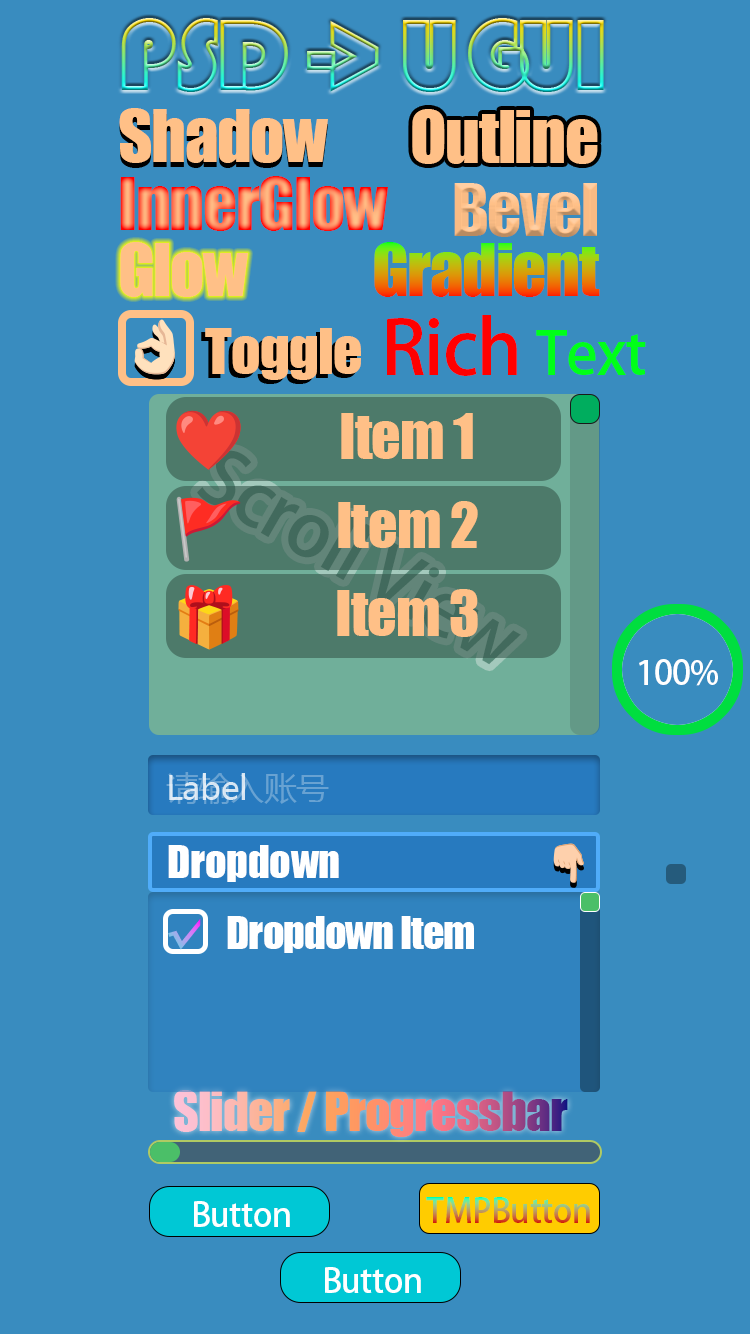
<style>
.page{position:relative;width:750px;height:1334px;background:#398cbf}
.page>*{position:absolute;margin:0}
.t1{font:66.7px "Impact";letter-spacing:-0.02em;color:#ffc087}
.t2{font:66.7px "Impact";letter-spacing:-0.02em}
.t3{font:75px "AdobeHeitiStd-Regular";letter-spacing:-0.02em;color:#ff0000}
.t4{font:58.3px "AdobeHeitiStd-Regular";letter-spacing:-0.02em;color:#00ff18}
.t5{font:58.3px "Impact";letter-spacing:-0.02em;color:#ffc087}
.t6{font:33.3px "AdobeHeitiStd-Regular";letter-spacing:-0.02em;color:#ffffff}
.t7{font:33.3px "MicrosoftYaHeiUI";letter-spacing:-0.02em;color:#68a2d2}
.t8{font:33.3px "MicrosoftYaHeiUI";letter-spacing:-0.02em;color:#d8e7f3}
.t9{font:41.7px "Impact";color:#ffffff}
.t10{font:41.7px "Impact";letter-spacing:-0.02em;color:#ffffff}
.t11{font:50px "Impact";letter-spacing:-0.02em}
.t12{font:33.3px "AdobeHeitiStd-Regular";letter-spacing:-0.02em}
</style>
<div class="page">
<p class="t1" style="left:119px;top:108px;width:209px;height:55px">Shadow</p>
<p class="t1" style="left:412px;top:109px;width:186px;height:55px">Outline</p>
<p class="t2" style="left:120px;top:176px;width:268px;height:55px">InnerGlow</p>
<p class="t1" style="left:454px;top:183px;width:143px;height:54px">Bevel</p>
<p class="t1" style="left:120px;top:242px;width:128px;height:55px">Glow</p>
<p class="t2" style="left:374px;top:242px;width:226px;height:55px">Gradient</p>
<p class="t3" style="left:387px;top:315px;width:259px;height:61px">Rich <span class="t4">Text</span></p>
<p class="t5" style="left:205px;top:328px;width:156px;height:52px">Toggle</p>
<p class="t5" style="left:341px;top:413px;width:132px;height:46px">Item 1</p>
<p class="t5" style="left:338px;top:501px;width:140px;height:47px">Item 2</p>
<p class="t5" style="left:337px;top:589px;width:141px;height:48px">Item 3</p>
<p class="t6" style="left:639px;top:659px;width:79px;height:27px">100%</p>
<p class="t7" style="left:166px;top:772px;width:163px;height:32px">请输入账号</p>
<p class="t8" style="left:169px;top:773px;width:76px;height:27px">Label</p>
<p class="t9" style="left:168px;top:845px;width:171px;height:37px">Dropdown</p>
<p class="t10" style="left:227px;top:916px;width:247px;height:37px">Dropdown Item</p>
<p class="t11" style="left:174px;top:1090px;width:394px;height:47px">Slider / Progressbar</p>
<p class="t6" style="left:194px;top:1201px;width:96px;height:26px">Button</p>
<p class="t12" style="left:426px;top:1197px;width:164px;height:26px">TMPButton</p>
<p class="t6" style="left:325px;top:1267px;width:96px;height:26px">Button</p>
</div>
